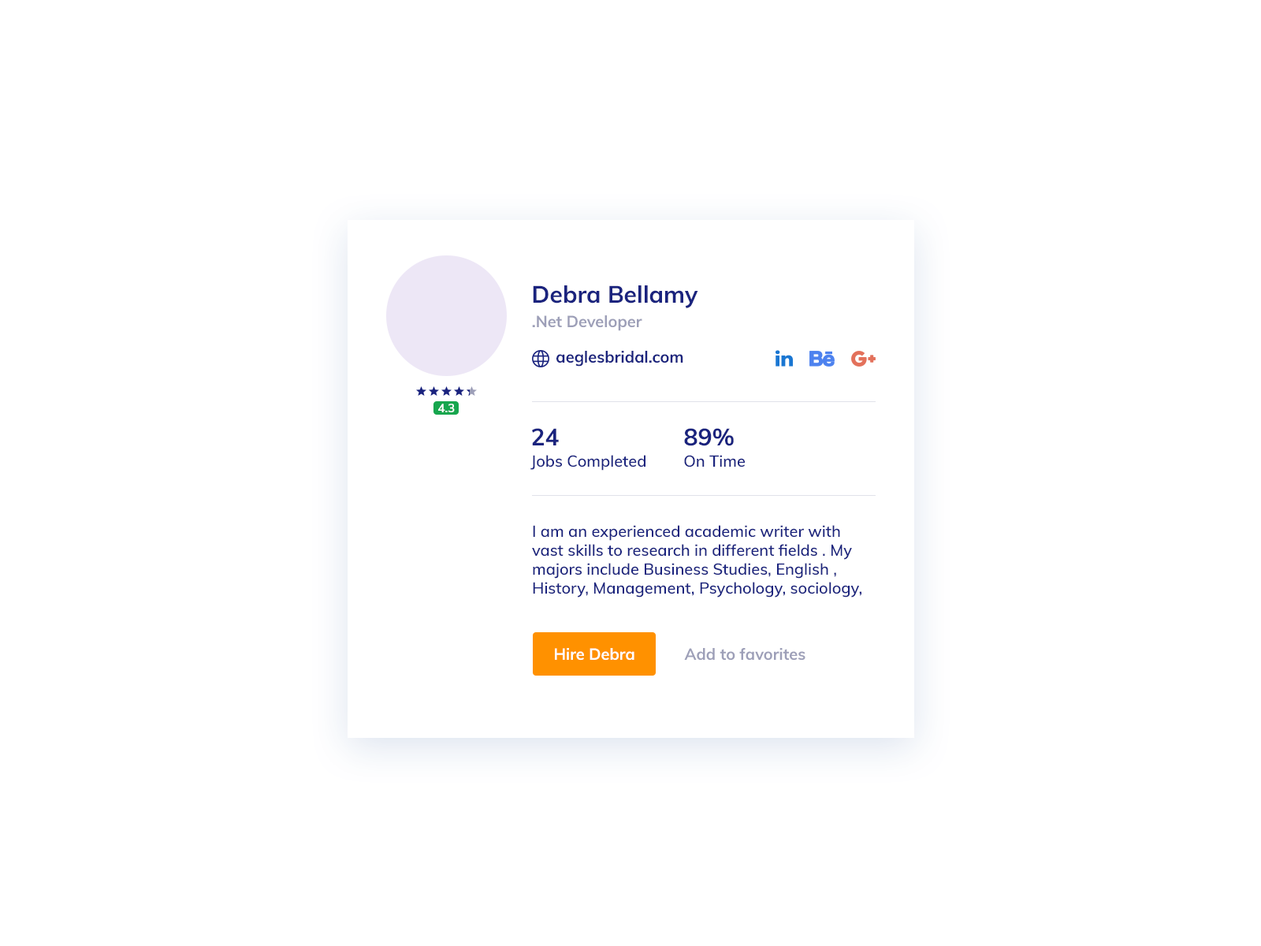
<style>
.page{position:relative;width:1261px;height:946px;background:#ffffff}
.page>*{position:absolute;margin:0}
.t1{font:23.6px "Muli-Bold";color:#1a237e}
.t2{font:15.8px "Muli-Bold";color:#9d9fb8}
.t3{font:15.8px "Muli-Bold";color:#1a237e}
.t4{font:11.8px "Muli-Bold";color:#ffffff}
.t5{font:15.8px/21.3px "Muli-SemiBold";color:#1a237e}
.t6{font:23.6px/21.3px "Muli-Bold";color:#1a237e}
.t7{font:15.8px "Muli-SemiBold";color:#1a237e}
.t8{font:15.8px "Muli-Bold";color:#ffffff}
</style>
<div class="page">
<p class="t1" style="left:533px;top:285px;width:165px;height:23px">Debra Bellamy</p>
<p class="t2" style="left:532px;top:315px;width:110px;height:16px">.Net Developer</p>
<p class="t3" style="left:556px;top:351px;width:127px;height:15px">aeglesbridal.com</p>
<p class="t4" style="left:438px;top:403px;width:17px;height:9px">4.3</p>
<p class="t5" style="left:530px;top:428px;width:115px;height:42px"><span class="t6">24<br></span>Jobs Completed</p>
<p class="t5" style="left:684px;top:428px;width:61px;height:39px"><span class="t6">89%<br></span>On Time</p>
<p class="t7" style="left:532px;top:525px;width:329px;height:72px">I am an experienced academic writer with vast skills to research in different fields . My majors include Business Studies, English , History, Management, Psychology, sociology,</p>
<p class="t8" style="left:555px;top:648px;width:79px;height:12px">Hire Debra</p>
<p class="t2" style="left:684px;top:648px;width:121px;height:12px">Add to favorites</p>
</div>
